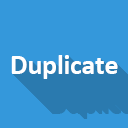
<style>
.page{position:relative;width:128px;height:128px;background:#3498db}
.page>*{position:absolute;margin:0}
.t1{font:28px "Calibri-Bold";letter-spacing:-0.01em;color:#ffffff}
</style>
<div class="page">
<p class="t1" style="left:11px;top:55px;width:107px;height:24px">Duplicate</p>
</div>
